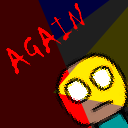
<style>
.page{position:relative;width:128px;height:128px;background:#3e0000}
.page>*{position:absolute;margin:0}
.t1{font:36px "Chiller-Regular";letter-spacing:0.075em;color:#ff0000;text-transform:uppercase}
</style>
<div class="page">
<p class="t1" style="left:6px;top:2px;width:79px;height:73px;rotate:-34deg">again</p>
</div>
